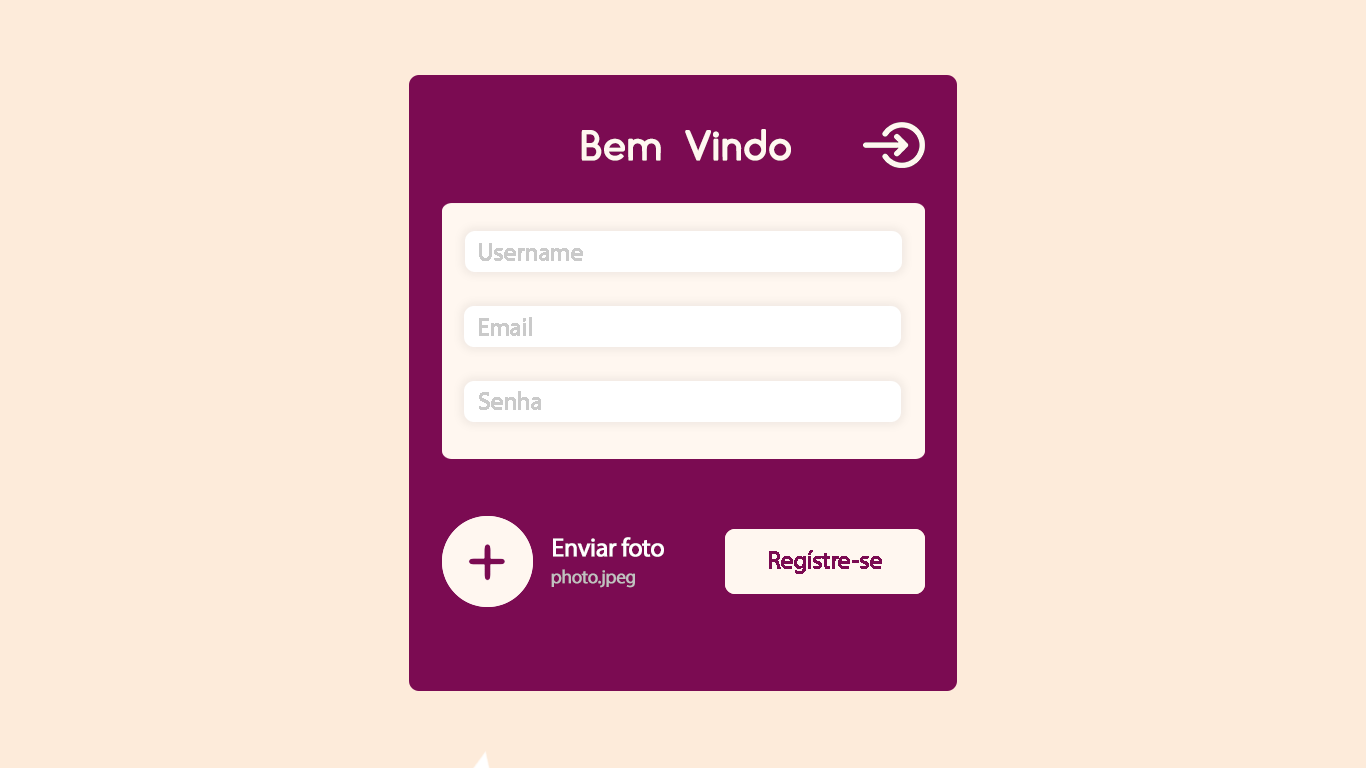
<style>
.page{position:relative;width:1366px;height:768px;background:#fdebda}
.page>*{position:absolute;margin:0}
.t1{font:43px "cream-DEMO";letter-spacing:-0.04em;color:#fff7f0;font-weight:bold}
.t2{font:26px "MyriadPro-Regular";letter-spacing:-0.04em;color:#ffffff;font-weight:bold}
.t3{font:25px "MyriadPro-Regular";letter-spacing:-0.04em;color:#7b0b52;font-weight:bold}
.t4{font:19px "MyriadPro-Regular";letter-spacing:-0.04em;color:#c1c1c1;font-weight:bold}
</style>
<div class="page">
<p class="t1" style="left:581px;top:129px;width:210px;height:32px">Bem Vindo</p>
<p class="t2" style="left:553px;top:537px;width:111px;height:20px">Enviar foto</p>
<p class="t3" style="left:769px;top:550px;width:113px;height:24px">Regístre-se</p>
<p class="t4" style="left:551px;top:569px;width:84px;height:19px">photo.jpeg</p>
</div>
